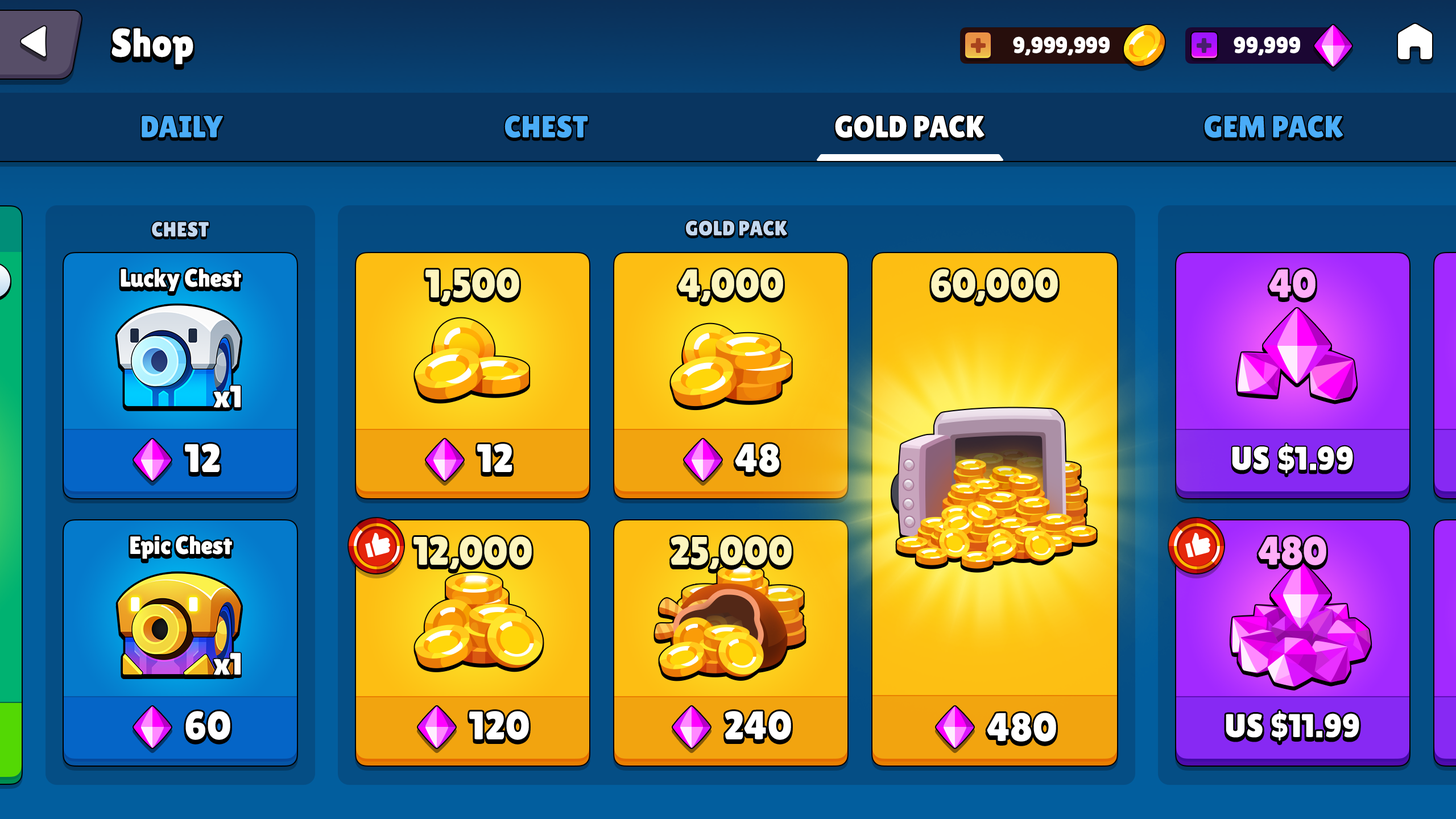
<style>
.page{position:relative;width:1456px;height:819px}
.page>*{position:absolute;margin:0}
.t1{font:39.8px "LilitaOne";color:#ffffff}
.t2{font:22.7px "LilitaOne";letter-spacing:-0.01em;color:#ffffff;text-transform:uppercase}
.t3{font:30.7px "LilitaOne";color:#4aacf7;text-transform:uppercase}
.t4{font:30.7px "LilitaOne";color:#ffffff;text-transform:uppercase}
.t5{font:20.5px "LilitaOne";letter-spacing:-0.01em;color:#c3d7ef;text-transform:uppercase}
.t6{font:39.8px "LilitaOne";color:#fdf5be}
.t7{font:39.8px "LilitaOne";letter-spacing:0.02em;color:#ffffff}
</style>
<div class="page">
<p class="t1" style="left:111px;top:28px;width:82px;height:36px">Shop</p>
<p class="t2" style="left:1013px;top:36px;width:97px;height:20px">9,999,999</p>
<p class="t2" style="left:1234px;top:36px;width:66px;height:20px">99,999</p>
<p class="t3" style="left:142px;top:115px;width:82px;height:23px">Daily</p>
<p class="t3" style="left:504px;top:115px;width:84px;height:23px">Chest</p>
<p class="t4" style="left:835px;top:115px;width:149px;height:23px">Gold Pack</p>
<p class="t3" style="left:1204px;top:115px;width:139px;height:23px">Gem pack</p>
<p class="t5" style="left:686px;top:221px;width:101px;height:14px">Gold pack</p>
<p class="t6" style="left:425px;top:269px;width:94px;height:33px">1,500</p>
<p class="t6" style="left:678px;top:269px;width:105px;height:33px">4,000</p>
<p class="t6" style="left:931px;top:269px;width:127px;height:33px">60,000</p>
<p class="t7" style="left:477px;top:444px;width:35px;height:28px">12</p>
<p class="t7" style="left:735px;top:444px;width:45px;height:29px">48</p>
<p class="t6" style="left:413px;top:536px;width:119px;height:33px">12,000</p>
<p class="t6" style="left:671px;top:536px;width:121px;height:33px">25,000</p>
<p class="t7" style="left:469px;top:711px;width:60px;height:29px">120</p>
<p class="t7" style="left:725px;top:711px;width:66px;height:29px">240</p>
<p class="t7" style="left:987px;top:713px;width:69px;height:29px">480</p>
</div>
